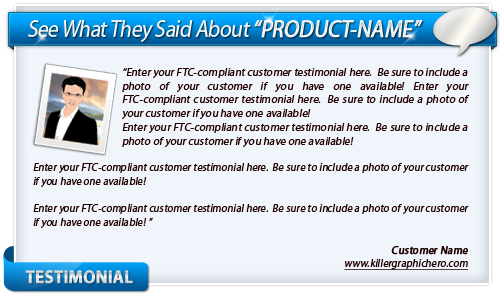
<style>
.page{position:relative;width:500px;height:300px;background:#eff5fb}
.page>*{position:absolute;margin:0}
.t1{font:24px "MyriadPro-Regular";letter-spacing:-0.025em;color:#f6f5f4;font-style:italic;scale:0.9 1}
.t2{font:24px "MyriadPro-Regular";letter-spacing:-0.025em;color:#f6f5f4;font-weight:bold;font-style:italic;scale:0.9 1}
.t3{font:11px/13.8px "MyriadPro-Regular";letter-spacing:0.01em;color:#240000;font-style:italic}
.t4{font:11px/13.8px "MyriadPro-Regular";letter-spacing:0.01em;color:#210101;font-style:italic;scale:0.95 1}
.t5{font:11px/13.8px "MyriadPro-Regular";letter-spacing:0.01em;color:#210101;font-weight:bold;font-style:italic;scale:0.95 1}
.t6{font:11px/13.8px "MyriadPro-Regular";letter-spacing:0.01em;color:#210101;font-style:italic;text-decoration:underline;scale:0.95 1}
.t7{font:18.4px "MyriadPro-Bold";letter-spacing:-0.01em;font-weight:bold;scale:0.92 1}
</style>
<div class="page">
<p class="t1" style="left:28px;top:19px;width:395px;height:23px">See What They Said About <span class="t2">“PRODUCT-NAME”</span></p>
<p class="t3" style="left:122px;top:68px;width:348px;height:79px;text-align:justify">“Enter your FTC-compliant customer testimonial here.  Be sure to include a photo of your customer if you have one available! Enter your FTC-compliant customer testimonial here.  Be sure to include a photo of your customer if you have one available! <br>Enter your FTC-compliant customer testimonial here.  Be sure to include a photo of your customer if you have one available!</p>
<p class="t4" style="left:33px;top:163px;width:436px;height:107px;text-align:justify">Enter your FTC-compliant customer testimonial here.  Be sure to include a photo of your customer if you have one available! <br><br>Enter your FTC-compliant customer testimonial here.  Be sure to include a photo of your customer if you have one available! ”<br><br><span class="t5">Customer Name<br></span><span class="t6">www.killergraphichero.com</span></p>
<p class="t7" style="left:25px;top:270px;width:108px;height:14px">TESTIMONIAL</p>
</div>
